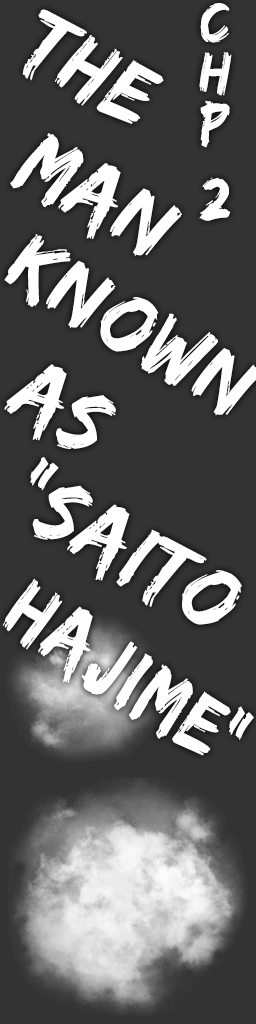
<style>
.page{position:relative;width:256px;height:1024px;background:#333333}
.page>*{position:absolute;margin:0}
.t1{font:60px/25.1px "EdoSZ";letter-spacing:0.03em;color:#ffffff}
.t2{font:91.3px "EdoSZ";letter-spacing:0.03em;color:#ffffff;scale:0.96 1}
.t3{font:88.6px "EdoSZ";letter-spacing:0.03em;color:#ffffff;scale:0.9 1}
</style>
<div class="page">
<p class="t1" style="left:199px;top:3px;width:33px;height:218px;text-align:center">C<br><br>H<br><br>P<br><br><br>2</p>
<p class="t2" style="left:22px;top:9px;width:142px;height:115px;rotate:30deg">The</p>
<p class="t2" style="left:10px;top:133px;width:172px;height:123px;rotate:30deg">Man</p>
<p class="t2" style="left:4px;top:364px;width:112px;height:85px;rotate:30deg">as</p>
<p class="t2" style="left:30px;top:457px;width:212px;height:168px;rotate:30deg">“saito</p>
<p class="t3" style="left:2px;top:578px;width:252px;height:178px;rotate:33deg">Hajime”</p>
</div>
